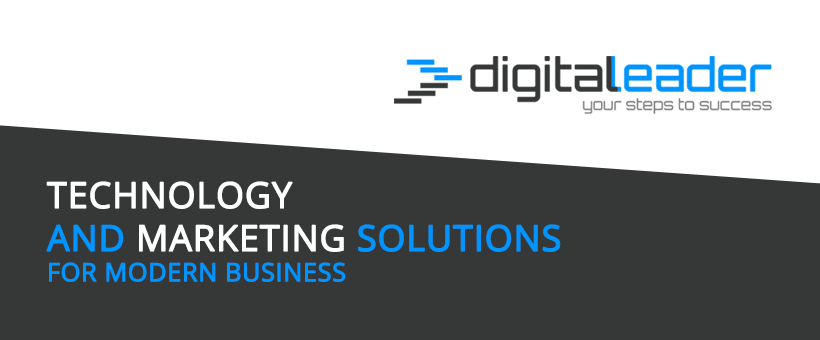
<style>
.page{position:relative;width:820px;height:340px;background:#363737}
.page>*{position:absolute;margin:0}
.t1{font:25.2px "OpenSans";color:#0094ff;text-transform:uppercase;font-weight:bold}
.t2{font:35.8px "OpenSans";color:#ffffff;text-transform:uppercase;font-weight:bold}
.t3{font:35.8px "OpenSans";color:#0094ff;text-transform:uppercase;font-weight:bold}
</style>
<div class="page">
<p class="t1" style="left:46px;top:181px;width:515px;height:101px"><span class="t2">Technology <br></span><span class="t3">and</span><span class="t2"> marketing </span><span class="t3">soLutions <br></span>for MODERN business</p>
</div>
